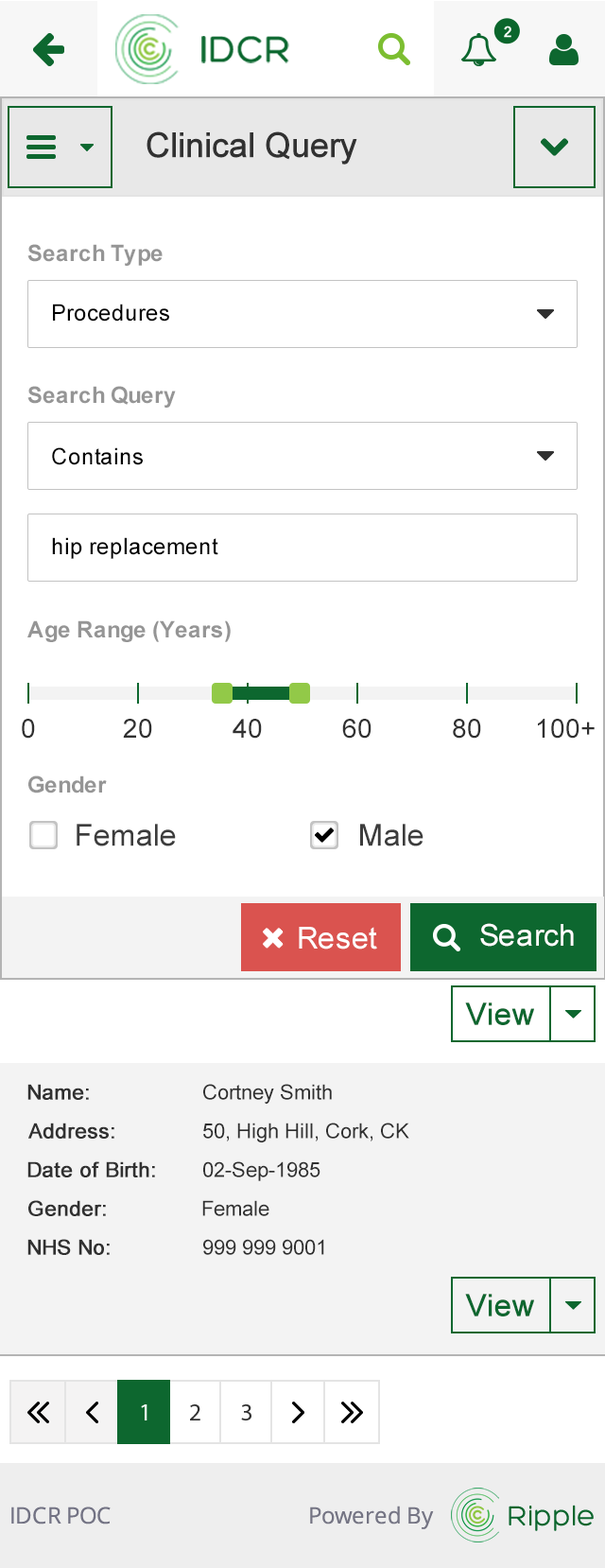
<style>
.page{position:relative;width:605px;height:1568px;background:#ffffff}
.page>*{position:absolute;margin:0}
.t1{font:34px "ArialMT";color:#313131;font-weight:bold}
.t2{font:22.7px "Arial-BoldMT";color:#959595}
.t3{font:22.7px "ArialMT";color:#000000}
.t4{font:26.5px "ArialMT";color:#303030}
.t5{font:30.3px "ArialMT";color:#3c3c3c}
.t6{font:30.3px "ArialMT";color:#ffffff}
.t7{font:30.3px "ArialMT";color:#0d672f;font-weight:bold}
.t8{font:20.8px "ArialMT";color:#303030;font-weight:bold}
.t9{font:20.8px "ArialMT";color:#303030}
</style>
<div class="page">
<p class="t1" style="left:147px;top:131px;width:210px;height:34px">Clinical Query</p>
<p class="t2" style="left:27px;top:244px;width:136px;height:22px">Search Type</p>
<p class="t3" style="left:53px;top:304px;width:116px;height:18px">Procedures</p>
<p class="t2" style="left:27px;top:386px;width:149px;height:22px">Search Query</p>
<p class="t3" style="left:52px;top:447px;width:91px;height:18px">Contains</p>
<p class="t3" style="left:52px;top:537px;width:166px;height:22px">hip replacement</p>
<p class="t2" style="left:27px;top:620px;width:204px;height:22px">Age Range (Years)</p>
<p class="t4" style="left:22px;top:719px;width:13px;height:20px">0</p>
<p class="t4" style="left:123px;top:719px;width:29px;height:20px">20</p>
<p class="t4" style="left:233px;top:719px;width:29px;height:20px">40</p>
<p class="t4" style="left:342px;top:719px;width:30px;height:20px">60</p>
<p class="t4" style="left:453px;top:719px;width:28px;height:20px">80</p>
<p class="t4" style="left:538px;top:719px;width:57px;height:20px">100+</p>
<p class="t2" style="left:28px;top:775px;width:79px;height:18px">Gender</p>
<p class="t5" style="left:77px;top:824px;width:99px;height:22px">Female</p>
<p class="t5" style="left:360px;top:824px;width:64px;height:22px">Male</p>
<p class="t6" style="left:299px;top:927px;width:78px;height:23px">Reset</p>
<p class="t6" style="left:480px;top:923px;width:94px;height:24px">Search</p>
<p class="t7" style="left:465px;top:1002px;width:69px;height:23px">View</p>
<p class="t8" style="left:27px;top:1084px;width:62px;height:16px">Name:</p>
<p class="t9" style="left:203px;top:1084px;width:129px;height:20px">Cortney Smith</p>
<p class="t8" style="left:28px;top:1123px;width:86px;height:16px">Address:</p>
<p class="t9" style="left:203px;top:1123px;width:206px;height:19px">50, High Hill, Cork, CK</p>
<p class="t8" style="left:27px;top:1161px;width:128px;height:16px">Date of Birth:</p>
<p class="t9" style="left:203px;top:1161px;width:118px;height:20px">02-Sep-1985</p>
<p class="t8" style="left:28px;top:1200px;width:78px;height:16px">Gender:</p>
<p class="t9" style="left:202px;top:1200px;width:68px;height:16px">Female</p>
<p class="t8" style="left:27px;top:1239px;width:83px;height:16px">NHS No:</p>
<p class="t9" style="left:203px;top:1239px;width:121px;height:16px">999 999 9001</p>
<p class="t7" style="left:465px;top:1294px;width:69px;height:22px">View</p>
</div>
